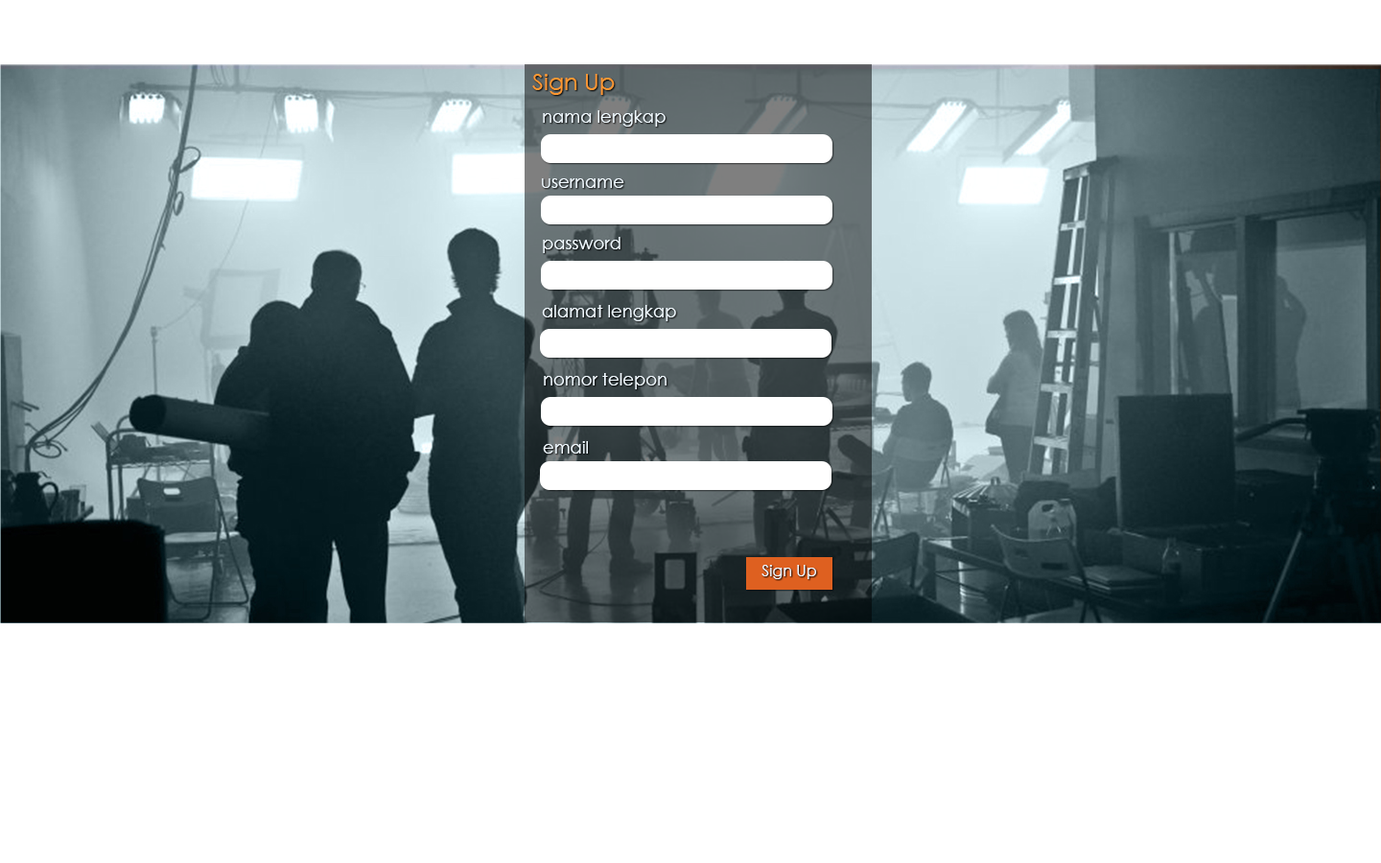
<style>
.page{position:relative;width:1381px;height:863px;background:#ffffff}
.page>*{position:absolute;margin:0}
.t1{font:23px "CenturyGothic";color:#ff9933}
.t2{font:17.3px "CenturyGothic";color:#f0f9ff}
.t3{font:15.3px "CenturyGothic";color:#f0f9ff}
</style>
<div class="page">
<p class="t1" style="left:532px;top:74px;width:83px;height:21px">Sign Up</p>
<p class="t2" style="left:543px;top:110px;width:123px;height:17px">nama lengkap</p>
<p class="t2" style="left:542px;top:178px;width:82px;height:10px">username</p>
<p class="t2" style="left:543px;top:237px;width:78px;height:16px">password</p>
<p class="t2" style="left:542px;top:305px;width:134px;height:16px">alamat lengkap</p>
<p class="t2" style="left:544px;top:373px;width:123px;height:16px">nomor telepon</p>
<p class="t2" style="left:543px;top:441px;width:45px;height:13px">email</p>
<p class="t3" style="left:762px;top:565px;width:54px;height:14px">Sign Up</p>
</div>
